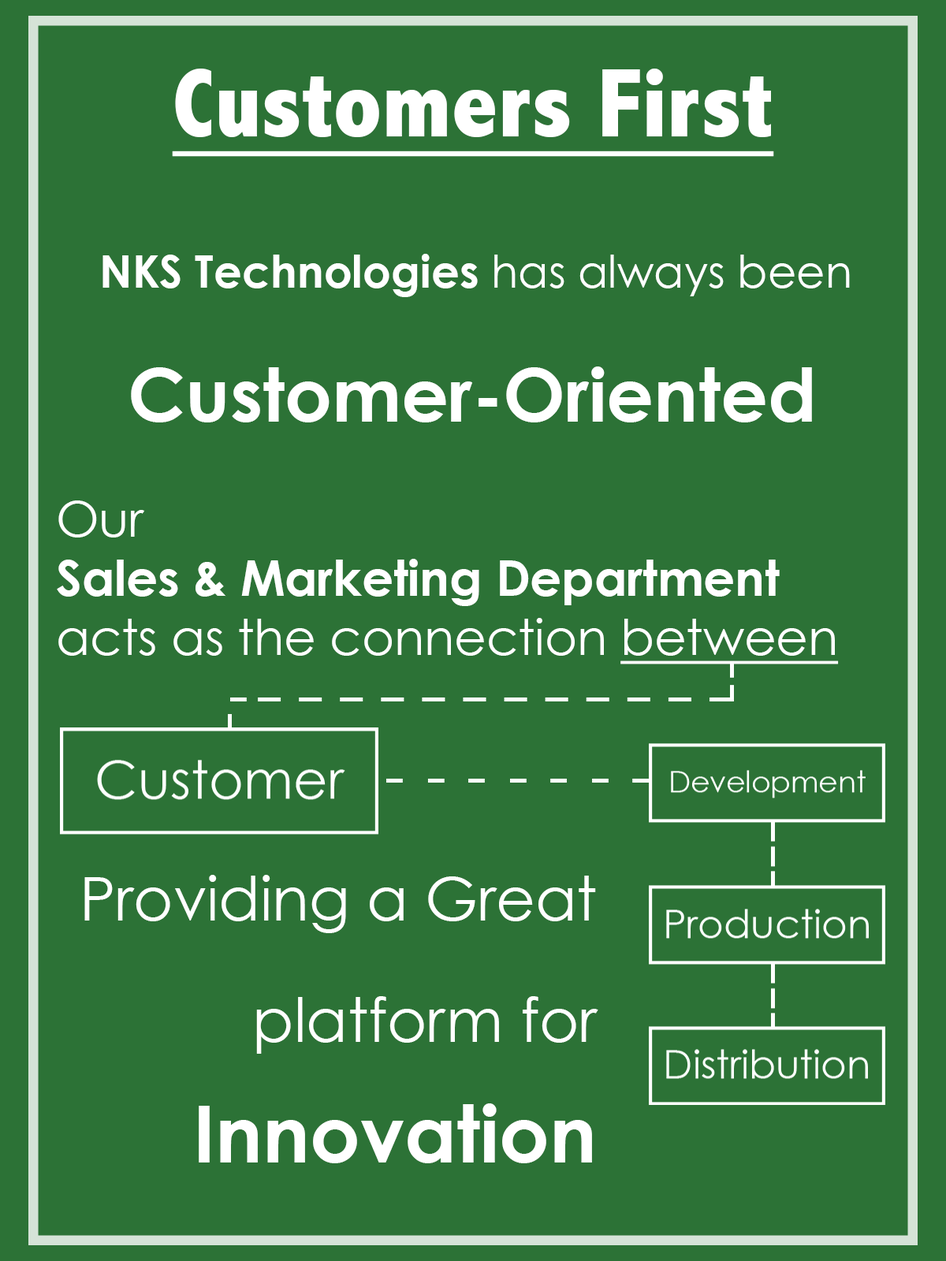
<style>
.page{position:relative;width:946px;height:1261px;background:#2c7236}
.page>*{position:absolute;margin:0}
.t1{font:98.6px "AbadiMT-CondensedExtraBold";color:#ffffff;text-decoration:underline}
.t2{font:44.5px "CenturyGothic-Bold";color:#ffffff}
.t3{font:44.5px "CenturyGothic";color:#ffffff}
.t4{font:73.8px "CenturyGothic-Bold";color:#ffffff}
.t5{font:49px/59.1px "CenturyGothic-Bold";color:#ffffff}
.t6{font:49px/59.1px "CenturyGothic";color:#ffffff}
.t7{font:49px/59.1px "CenturyGothic";color:#ffffff;text-decoration:underline}
.t8{font:60.4px/120.7px "CenturyGothic";color:#ffffff}
.t9{font:78.6px/120.7px "CenturyGothic-Bold";color:#ffffff}
</style>
<div class="page">
<p class="t1" style="left:172px;top:69px;width:602px;height:88px">Customers First</p>
<p class="t2" style="left:102px;top:254px;width:748px;height:43px">NKS Technologies<span class="t3"> has always been</span></p>
<p class="t4" style="left:131px;top:366px;width:681px;height:56px">Customer-Oriented</p>
<p class="t5" style="left:57px;top:500px;width:782px;height:164px"><span class="t6">Our<br></span>Sales &amp; Marketing Department<br><span class="t6">acts as the connection </span><span class="t7">between</span></p>
<p class="t8" style="left:84px;top:875px;width:514px;height:288px;text-align:right">Providing a Great<br>platform for<br><span class="t9">Innovation</span></p>
</div>
